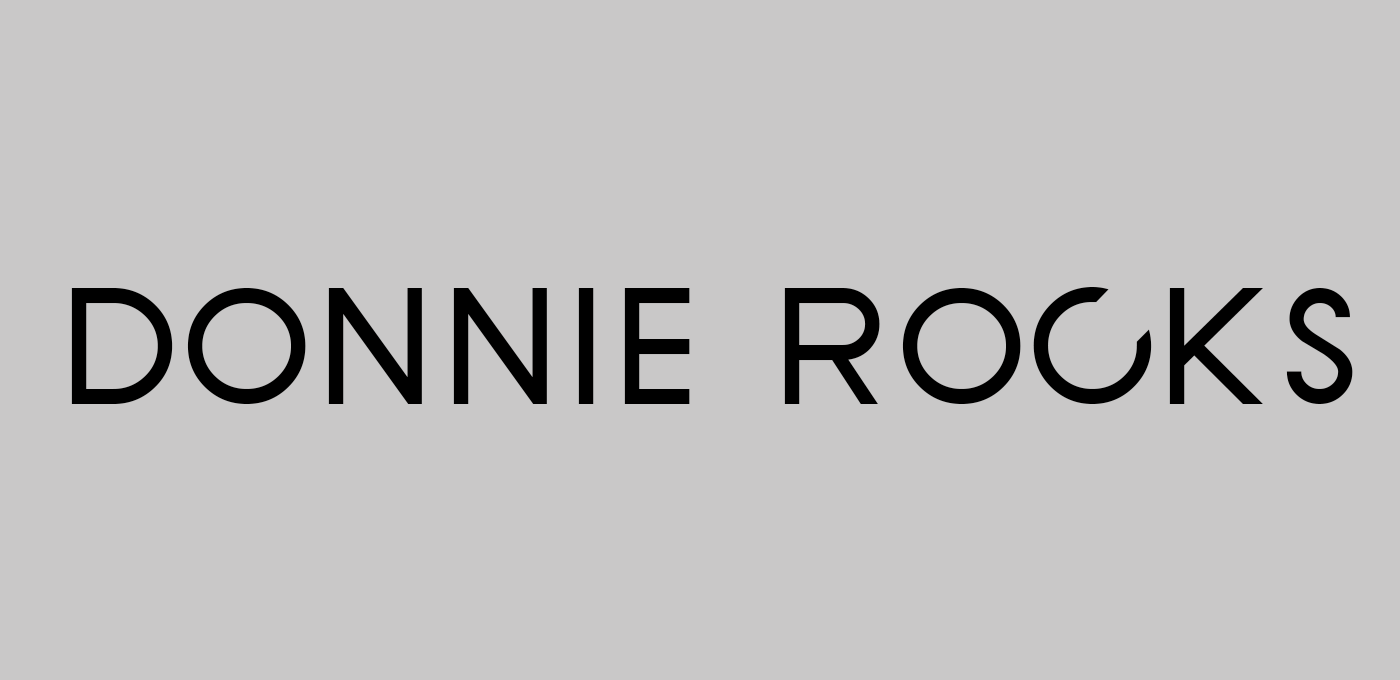
<style>
.page{position:relative;width:1400px;height:680px;background:#c9c8c8}
.page>*{position:absolute;margin:0}
.t1{font:175px "SFNewRepublicSC";color:#000000}
</style>
<div class="page">
<p class="t1" style="left:71px;top:287px;width:1282px;height:117px">donnie rocks</p>
</div>
